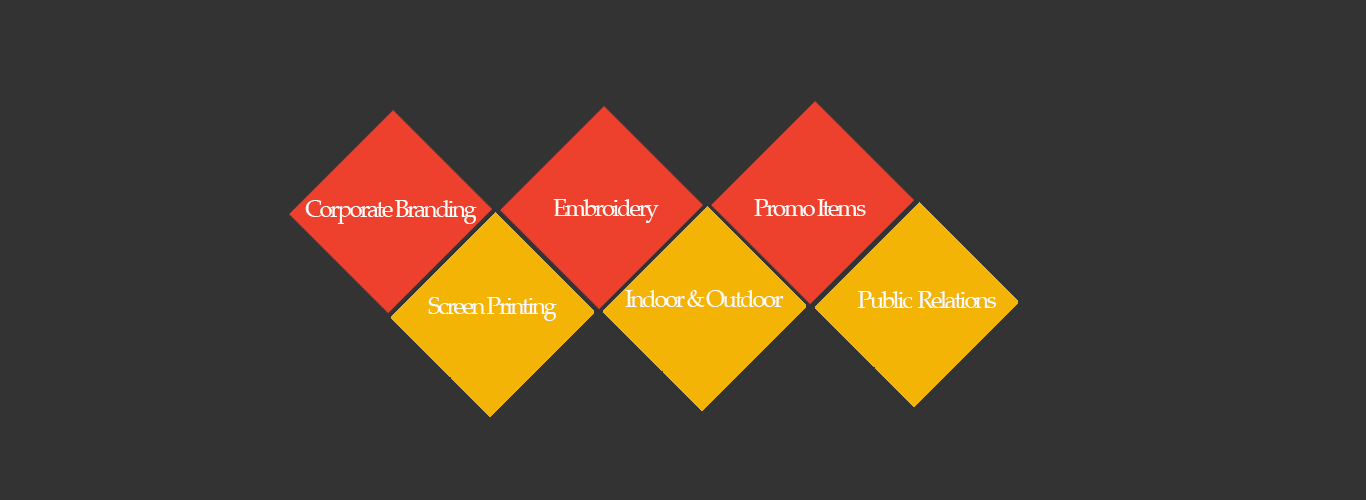
<style>
.page{position:relative;width:1366px;height:500px;background:#333333}
.page>*{position:absolute;margin:0}
.t1{font:24px "PalatinoLinotype-Roman";letter-spacing:-0.1em;color:#fcfbf8}
</style>
<div class="page">
<p class="t1" style="left:305px;top:200px;width:172px;height:24px">Corporate Branding</p>
<p class="t1" style="left:553px;top:199px;width:106px;height:24px">Embroidery</p>
<p class="t1" style="left:754px;top:199px;width:112px;height:17px">Promo Items</p>
<p class="t1" style="left:625px;top:290px;width:159px;height:17px">Indoor &amp; Outdoor</p>
<p class="t1" style="left:858px;top:291px;width:138px;height:17px">Public  Relations</p>
<p class="t1" style="left:428px;top:297px;width:129px;height:24px">Screen Printing</p>
</div>
